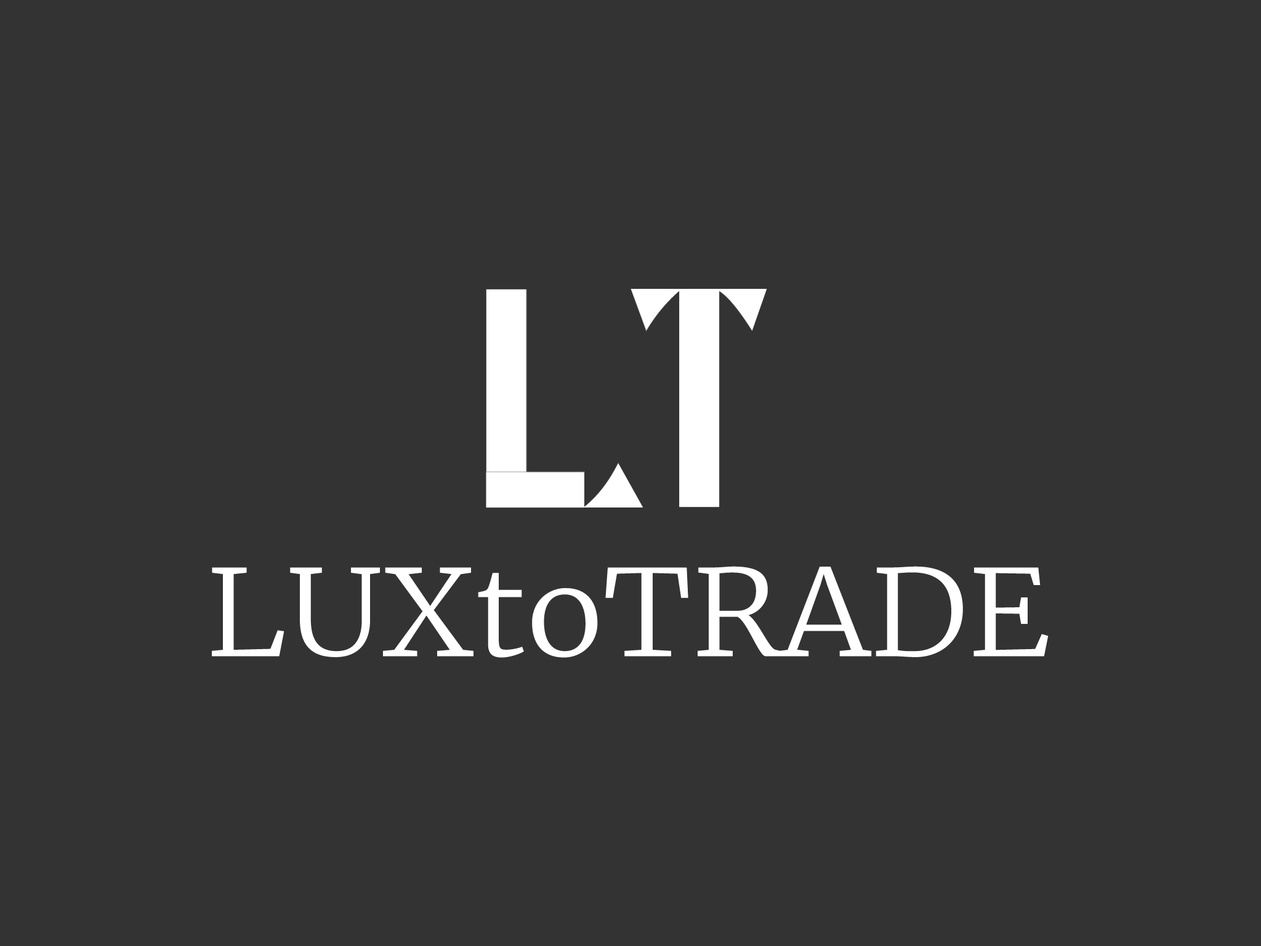
<style>
.page{position:relative;width:1261px;height:946px;background:#333333}
.page>*{position:absolute;margin:0}
.t1{font:119.1px "Merriweather-Light";color:#fffefe;scale:1.09 1}
</style>
<div class="page">
<p class="t1" style="left:212px;top:566px;width:837px;height:92px">LUXtoTRADE</p>
</div>
